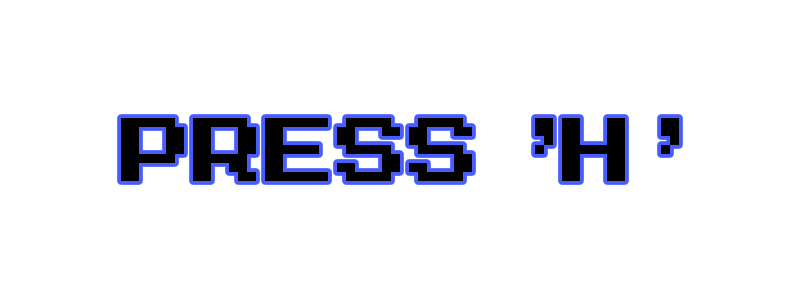
<style>
.page{position:relative;width:800px;height:300px;background:#ffffff}
.page>*{position:absolute;margin:0}
.t1{font:72px "MegaMan-2";color:#000000}
</style>
<div class="page">
<p class="t1" style="left:121px;top:118px;width:558px;height:63px">PRESS “H”</p>
</div>
